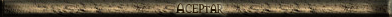
<style>
.page{position:relative;width:392px;height:17px}
.page>*{position:absolute;margin:0}
.t1{font:13.7px "Morpheus"}
</style>
<div class="page">
<p class="t1" style="left:175px;top:3px;width:52px;height:12px">Aceptar</p>
</div>
